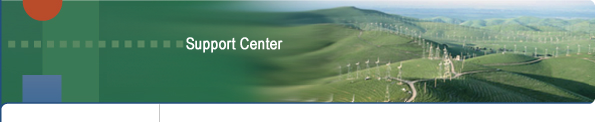
<style>
.page{position:relative;width:595px;height:122px}
.page>*{position:absolute;margin:0}
.t1{font:16px "ArialNarrow";color:#ffffff;font-weight:bold}
</style>
<div class="page">
<p class="t1" style="left:186px;top:37px;width:97px;height:16px">Support Center</p>
</div>
